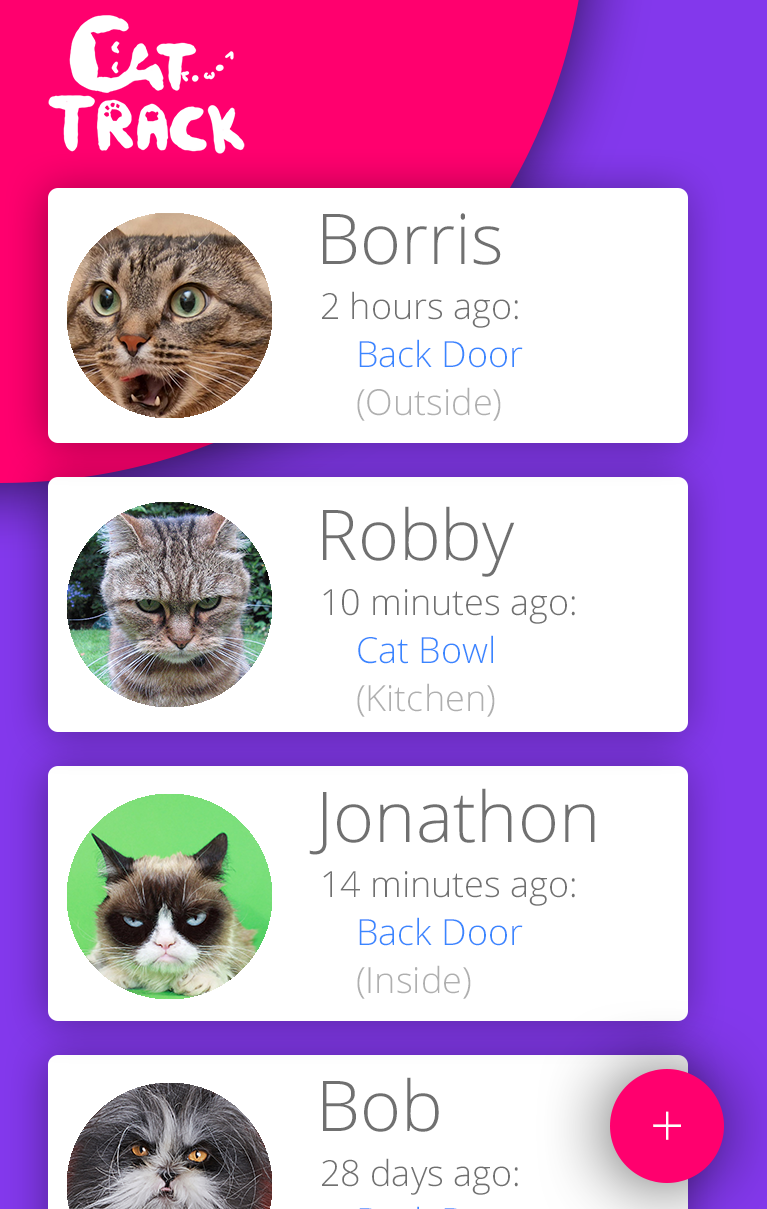
<style>
.page{position:relative;width:767px;height:1209px;background:#ffffff}
.page>*{position:absolute;margin:0}
.t1{font:70px "OpenSans-Light";color:#707070}
.t2{font:36px/48px "OpenSans-Light";color:#707070}
.t3{font:36px/48px "OpenSans-Light";color:#3a86ff}
.t4{font:36px/48px "OpenSans-Light";color:#afafaf}
.t5{font:60px "OpenSans-Light";color:#ffffff}
</style>
<div class="page">
<p class="t1" style="left:323px;top:213px;width:178px;height:52px">Borris</p>
<p class="t2" style="left:322px;top:291px;width:201px;height:130px">2 hours ago:<br><span class="t3"> Back Door<br></span><span class="t4"> (Outside)</span></p>
<p class="t1" style="left:323px;top:506px;width:192px;height:71px">Robby</p>
<p class="t2" style="left:323px;top:589px;width:252px;height:128px">10 minutes ago:<br><span class="t3"> Cat Bowl<br></span><span class="t4"> (Kitchen)</span></p>
<p class="t1" style="left:309px;top:788px;width:286px;height:67px">Jonathon</p>
<p class="t2" style="left:323px;top:871px;width:252px;height:128px">14 minutes ago:<br><span class="t3"> Back Door<br></span><span class="t4"> (Inside)</span></p>
<p class="t1" style="left:323px;top:1077px;width:116px;height:55px">Bob</p>
<p class="t5" style="left:653px;top:1111px;width:28px;height:29px">+</p>
</div>
